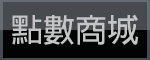
<style>
.page{position:relative;width:150px;height:60px;background:#474b4f}
.page>*{position:absolute;margin:0}
.t1{font:32px "AdobeFanHeitiStd-Bold";color:#c5c5c5}
</style>
<div class="page">
<p class="t1" style="left:12px;top:14px;width:126px;height:31px">點數商城</p>
</div>
